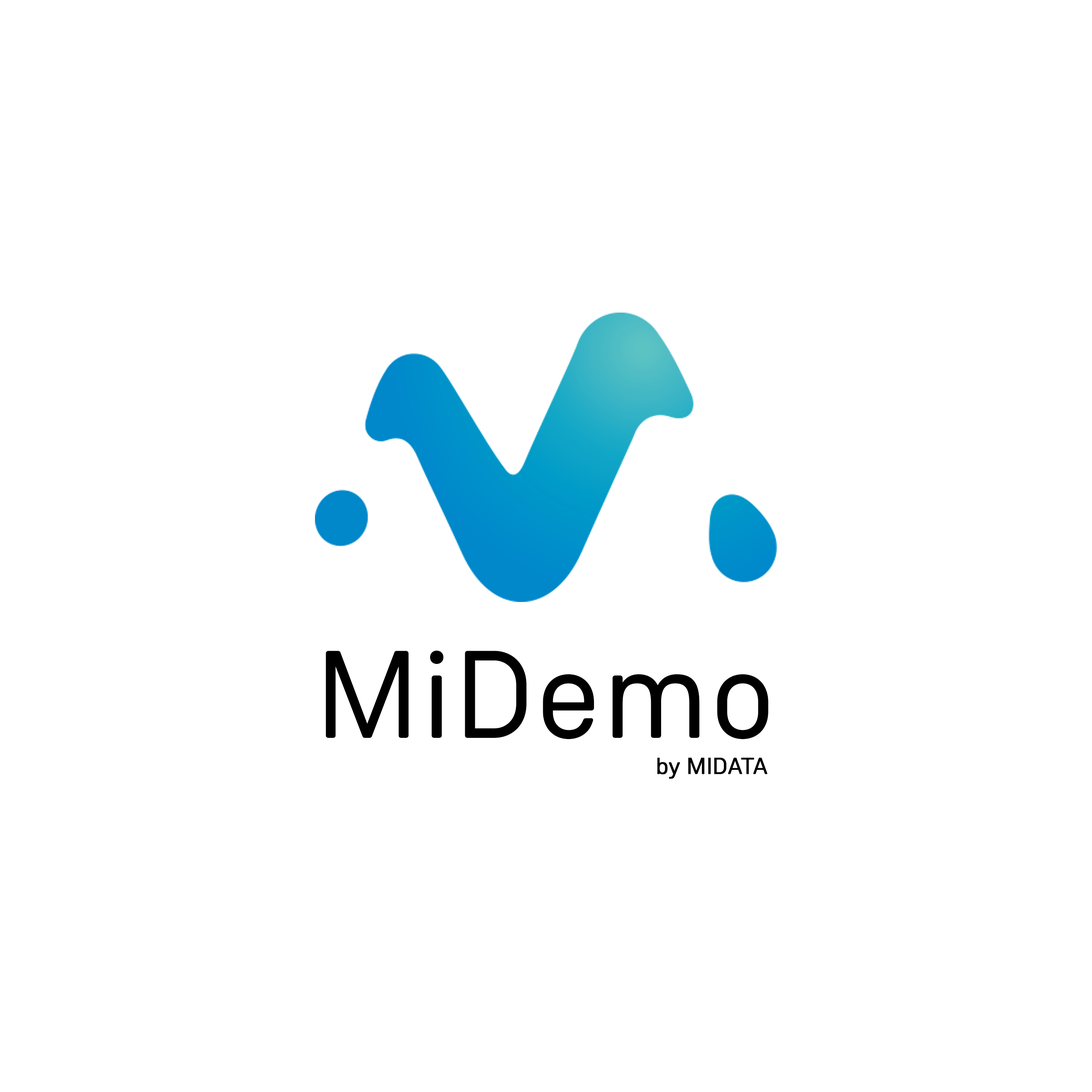
<style>
.page{position:relative;width:1092px;height:1092px;background:#ffffff}
.page>*{position:absolute;margin:0}
.t1{font:123.2px "WeissenhofGrotesk-Regular";color:#000000;font-weight:bold}
.t2{font:23.1px "WeissenhofGrotesk-Regular";color:#000000;font-weight:bold}
</style>
<div class="page">
<p class="t1" style="left:326px;top:650px;width:443px;height:89px">MiDemo</p>
<p class="t2" style="left:657px;top:757px;width:110px;height:22px">by MIDATA</p>
</div>
